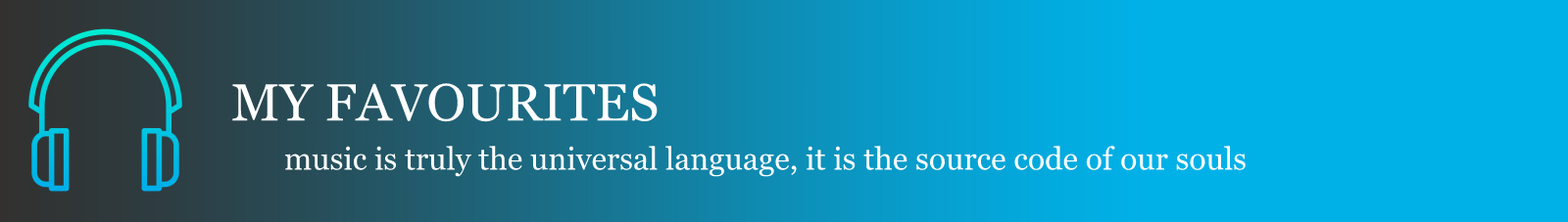
<style>
.page{position:relative;width:1568px;height:222px;background:#00b1e8}
.page>*{position:absolute;margin:0}
.t1{font:52.5px "Georgia";color:#ffffff}
.t2{font:31.4px "Georgia";color:#ffffff}
</style>
<div class="page">
<p class="t1" style="left:232px;top:83px;width:426px;height:39px">MY FAVOURITES</p>
<p class="t2" style="left:284px;top:146px;width:962px;height:31px">music is truly the universal language, it is the source code of our souls</p>
</div>
